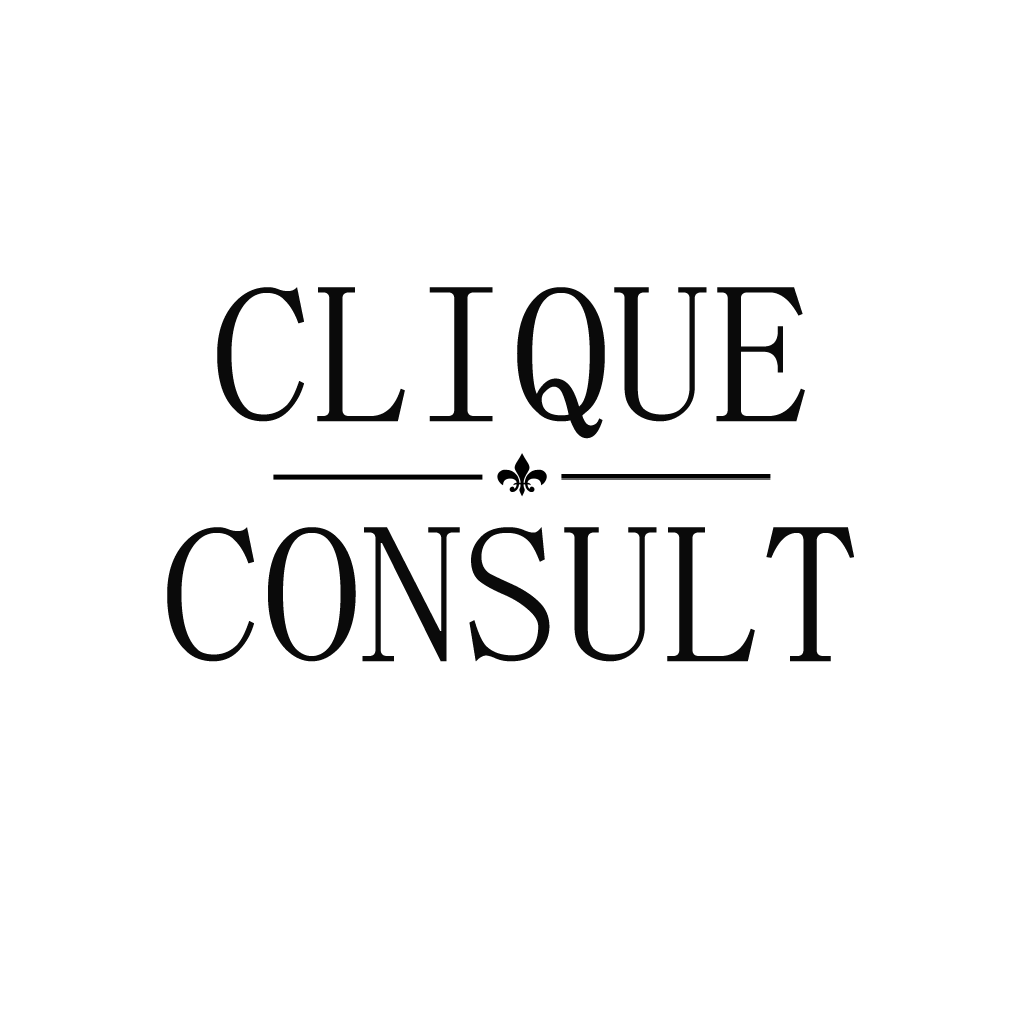
<style>
.page{position:relative;width:1024px;height:1024px;background:#ffffff}
.page>*{position:absolute;margin:0}
.t1{font:200px "MS-Mincho";color:#0a0a0a}
</style>
<div class="page">
<p class="t1" style="left:167px;top:287px;width:687px;height:375px;text-align:center">CLIQUE CONSULT</p>
</div>
